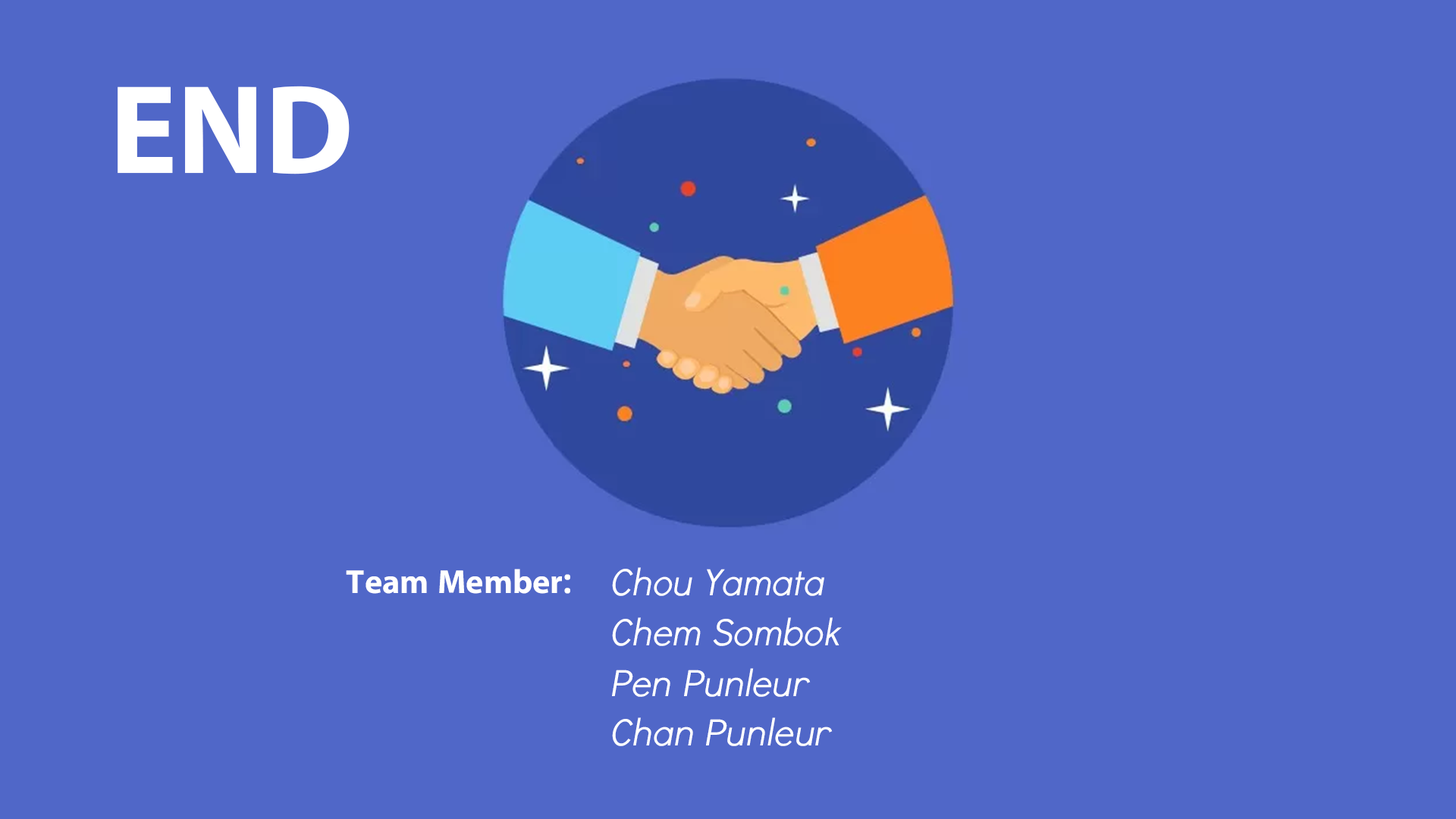
<style>
.page{position:relative;width:1456px;height:819px;background:#5067c8}
.page>*{position:absolute;margin:0}
.t1{font:127.3px "iKampuchea001_O'Chrov";color:#ffffff}
.t2{font:33.6px "iKampuchea001_O'Chrov";color:#ffffff}
.t3{font:38px "AKbalthomKbach1";color:#ffffff}
</style>
<div class="page">
<p class="t1" style="left:118px;top:86px;width:232px;height:88px">END</p>
<p class="t2" style="left:346px;top:569px;width:224px;height:25px">Team Member:</p>
<p class="t3" style="left:612px;top:567px;width:212px;height:29px">Chou Yamata</p>
<p class="t3" style="left:612px;top:617px;width:230px;height:29px">Chem Sombok</p>
<p class="t3" style="left:612px;top:668px;width:199px;height:29px">Pen Punleur</p>
<p class="t3" style="left:612px;top:717px;width:221px;height:29px">Chan Punleur</p>
</div>
